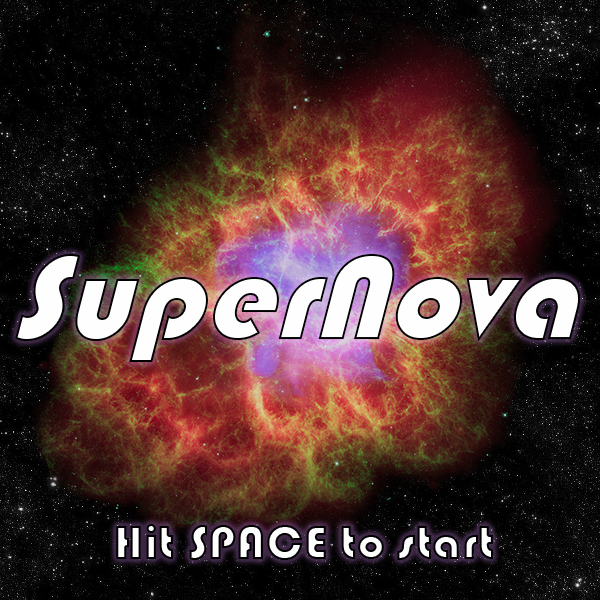
<style>
.page{position:relative;width:600px;height:600px}
.page>*{position:absolute;margin:0}
.t1{font:129.1px "Bauhaus93";color:#fefefe;scale:0.97 1}
.t2{font:50px "Bauhaus93"}
</style>
<div class="page">
<p class="t1" style="left:15px;top:254px;width:566px;height:108px">SuperNova</p>
<p class="t2" style="left:116px;top:524px;width:377px;height:36px">Hit SPACE to start</p>
</div>
